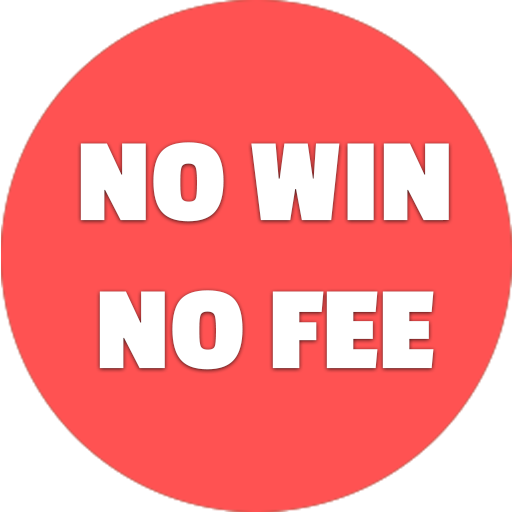
<style>
.page{position:relative;width:512px;height:512px;background:#ff5252}
.page>*{position:absolute;margin:0}
.t1{font:122.7px "PassionOne-Bold";color:#ffffff}
</style>
<div class="page">
<p class="t1" style="left:80px;top:142px;width:369px;height:228px;text-align:center">NO WIN<br>NO FEE</p>
</div>
